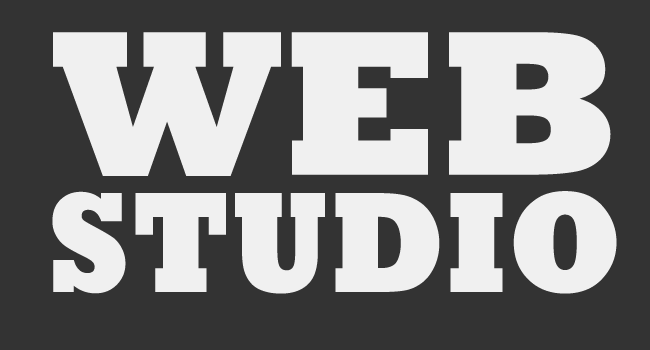
<style>
.page{position:relative;width:650px;height:350px;background:#333333}
.page>*{position:absolute;margin:0}
.t1{font:145.5px/117.4px "Rockwell-ExtraBold";color:#f0f0f0;scale:0.92 1}
.t2{font:209.5px "Rockwell-ExtraBold";color:#f0f0f0}
</style>
<div class="page">
<p class="t1" style="left:52px;top:32px;width:565px;height:262px;text-align:center"><span class="t2">WEB<br></span>STUDIO</p>
</div>
